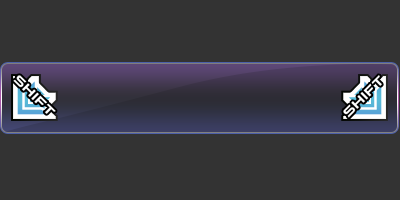
<style>
.page{position:relative;width:400px;height:200px;background:#333333}
.page>*{position:absolute;margin:0}
.t1{font:14px "Qaranta-Bold";color:#ffffff}
</style>
<div class="page">
<p class="t1" style="left:13px;top:75px;width:43px;height:39px;rotate:45deg">SHIFT</p>
<p class="t1" style="left:343px;top:75px;width:39px;height:43px;rotate:-45deg">SHIFT</p>
</div>
